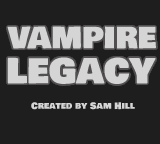
<style>
.page{position:relative;width:160px;height:144px;background:#1f1e1e}
.page>*{position:absolute;margin:0}
.t1{font:29px "BowlbyOneSC-Regular";color:#d5d5d5}
.t2{font:34px "BowlbyOneSC-Regular";color:#d5d5d5}
.t3{font:9px "BowlbyOneSC-Regular";color:#d5d5d5}
</style>
<div class="page">
<p class="t1" style="left:7px;top:26px;width:149px;height:23px">VAMPIRE</p>
<p class="t2" style="left:7px;top:57px;width:149px;height:28px">LEGACY</p>
<p class="t3" style="left:31px;top:102px;width:104px;height:8px">Created by Sam Hill</p>
</div>
